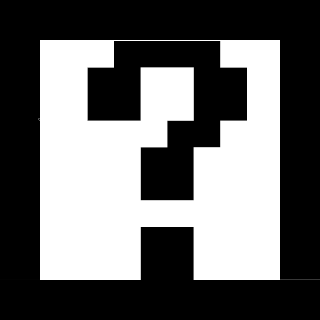
<style>
.page{position:relative;width:320px;height:320px;background:#000000}
.page>*{position:absolute;margin:0}
.t1{font:340px "Fixedsys";color:#000000}
</style>
<div class="page">
<p class="t1" style="left:87px;top:41px;width:160px;height:239px">?</p>
</div>
